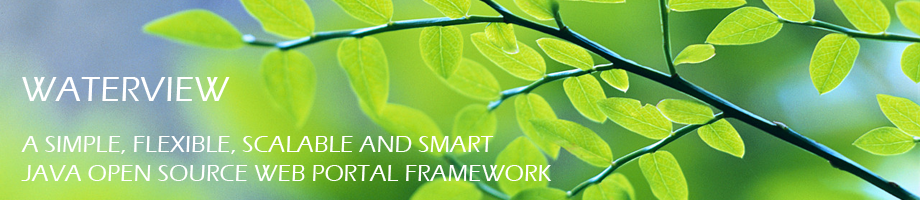
<style>
.page{position:relative;width:920px;height:200px}
.page>*{position:absolute;margin:0}
.t1{font:36px "ErasITC-Medium";color:#ffffff}
.t2{font:24px "ErasITC-Medium";color:#ffffff}
</style>
<div class="page">
<p class="t1" style="left:22px;top:77px;width:208px;height:24px">WATERVIEW</p>
<p class="t2" style="left:21px;top:136px;width:531px;height:45px">A SIMPLE, FLEXIBLE, SCALABLE AND SMART<br>JAVA OPEN SOURCE WEB PORTAL FRAMEWORK</p>
</div>
